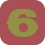
<style>
.page{position:relative;width:45px;height:45px;background:#a75157}
.page>*{position:absolute;margin:0}
.t1{font:50px "Saddlebag-Black";color:#949146}
</style>
<div class="page">
<p class="t1" style="left:6px;top:9px;width:33px;height:28px">6</p>
</div>
